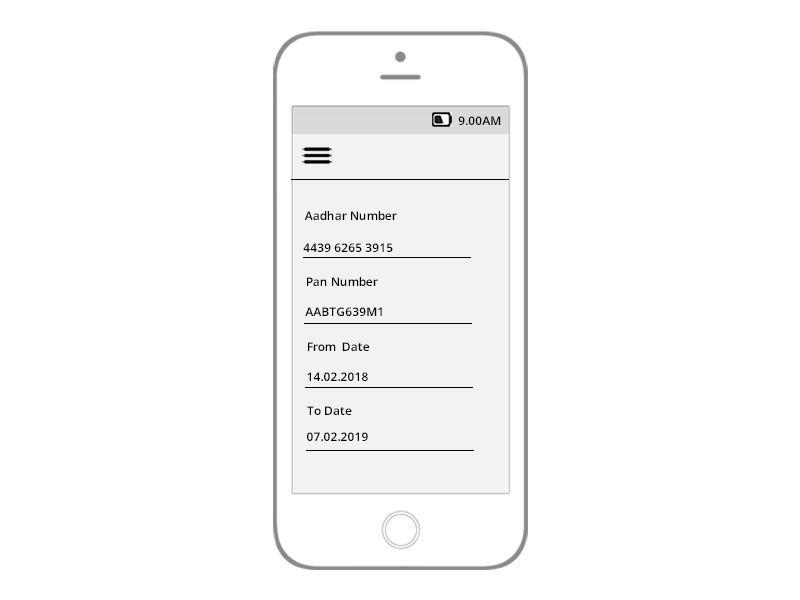
<style>
.page{position:relative;width:800px;height:600px;background:#ffffff}
.page>*{position:absolute;margin:0}
.t1{font:12px "OpenSans-Semibold";color:#000000}
</style>
<div class="page">
<p class="t1" style="left:458px;top:116px;width:43px;height:9px">9.00AM</p>
<p class="t1" style="left:304px;top:211px;width:93px;height:9px">Aadhar Number</p>
<p class="t1" style="left:303px;top:243px;width:90px;height:9px">4439 6265 3915</p>
<p class="t1" style="left:307px;top:277px;width:71px;height:9px">Pan Number</p>
<p class="t1" style="left:305px;top:307px;width:77px;height:9px">AABTG639M1</p>
<p class="t1" style="left:308px;top:342px;width:62px;height:9px">From  Date</p>
<p class="t1" style="left:307px;top:372px;width:61px;height:9px">14.02.2018</p>
<p class="t1" style="left:307px;top:406px;width:45px;height:9px">To Date</p>
<p class="t1" style="left:307px;top:432px;width:61px;height:9px">07.02.2019</p>
</div>
